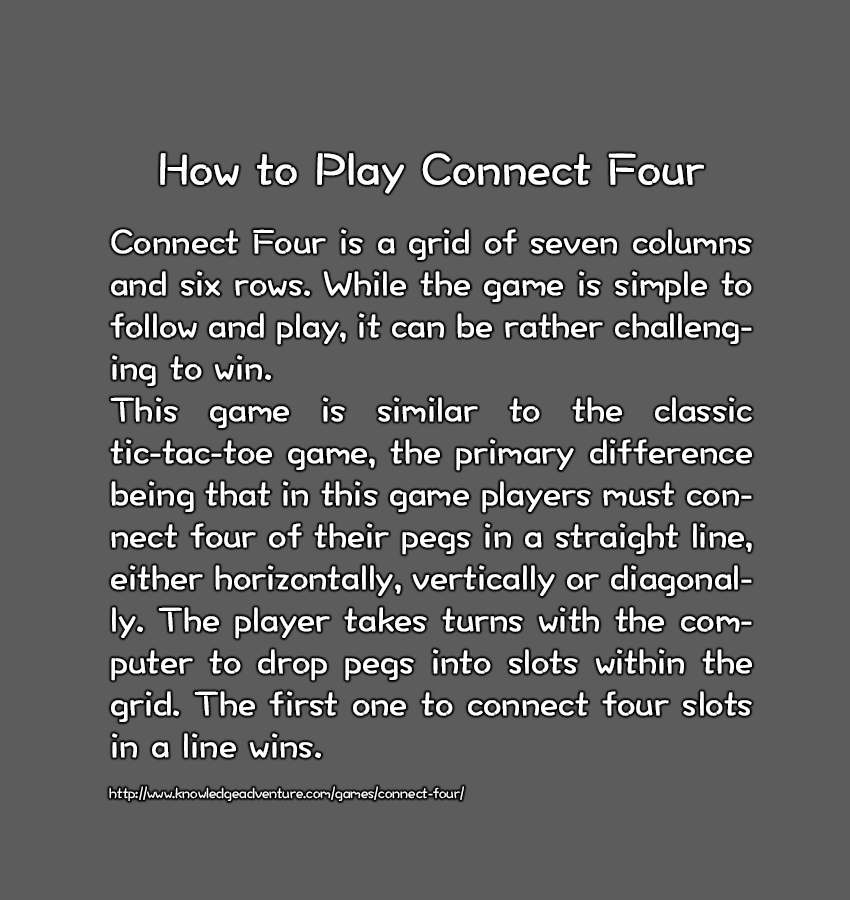
<style>
.page{position:relative;width:850px;height:900px;background:#5c5c5c}
.page>*{position:absolute;margin:0}
.t1{font:35px "DFWaWaTC-W5";color:#fffefe;font-weight:bold}
.t2{font:46px "DFWaWaTC-W5";color:#fffefe;font-weight:bold}
.t3{font:15px "DFWaWaTC-W5";color:#fffefe}
</style>
<div class="page">
<p class="t1" style="left:109px;top:153px;width:643px;height:648px;text-align:center"><span class="t2">How to Play Connect Four<br><br></span>Connect Four is a grid of seven columns and six rows. While the game is simple to follow and play, it can be rather challenging to win.<br>This game is similar to the classic tic-tac-toe game, the primary difference being that in this game players must connect four of their pegs in a straight line, either horizontally, vertically or diagonally. The player takes turns with the computer to drop pegs into slots within the grid. The first one to connect four slots in a line wins.<br><br><span class="t3">http://www.knowledgeadventure.com/games/connect-four/</span></p>
</div>
